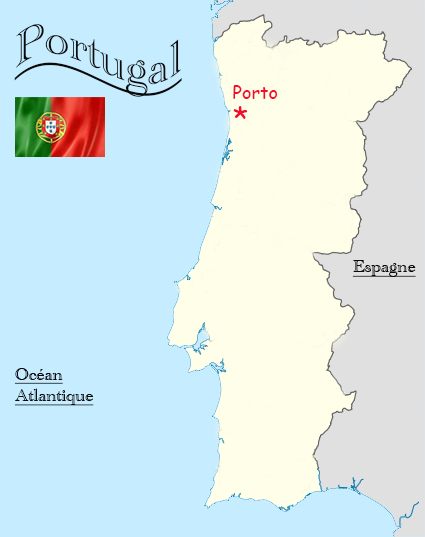
<style>
.page{position:relative;width:425px;height:537px;background:#c6ecff}
.page>*{position:absolute;margin:0}
.t1{font:48px "AcademyEngravedLetPlain";color:#0a0908;text-decoration:underline}
.t2{font:18px "ComicSansMS";color:#f20c2d}
.t3{font:30px "ComicSansMS";color:#f20c2d}
.t4{font:18px "AcademyEngravedLetPlain";color:#0a0908;text-decoration:underline}
</style>
<div class="page">
<p class="t1" style="left:14px;top:24px;width:168px;height:73px">Portugal</p>
<p class="t2" style="left:233px;top:85px;width:45px;height:14px">Porto</p>
<p class="t3" style="left:233px;top:106px;width:15px;height:13px">*</p>
<p class="t4" style="left:352px;top:260px;width:64px;height:17px">Espagne</p>
<p class="t4" style="left:14px;top:368px;width:80px;height:38px">Océan<br>Atlantique</p>
</div>
